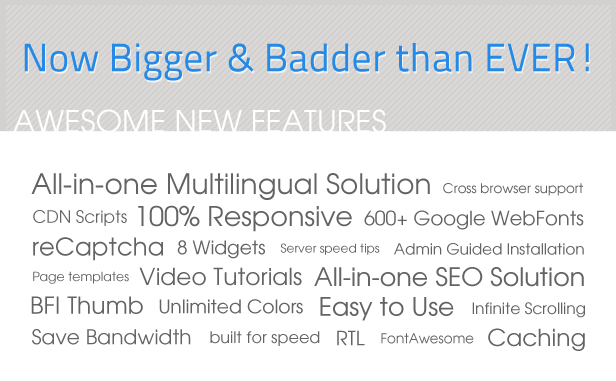
<style>
.page{position:relative;width:616px;height:381px;background:#ffffff}
.page>*{position:absolute;margin:0}
.t1{font:39.5px "TitilliumText25L-400wt";color:#2689e5}
.t2{font:30.3px "TeXGyreAdventor-Regular";color:#ffffff}
.t3{font:28px "TeXGyreAdventor-Regular";color:#636363}
.t4{font:13.3px "TeXGyreAdventor-Regular";color:#636363}
.t5{font:27.1px "TeXGyreAdventor-Regular";color:#636363}
.t6{font:16.8px "TeXGyreAdventor-Regular";color:#636363}
.t7{font:19.5px "TeXGyreAdventor-Regular";color:#636363}
.t8{font:24.6px "TeXGyreAdventor-Regular";color:#636363}
.t9{font:18.7px "TeXGyreAdventor-Regular";color:#636363}
.t10{font:12.1px "TeXGyreAdventor-Regular";color:#636363}
.t11{font:15.2px "TeXGyreAdventor-Regular";color:#636363}
.t12{font:23.4px "TeXGyreAdventor-Regular";color:#636363}
.t13{font:25.2px "TeXGyreAdventor-Regular";color:#636363}
.t14{font:12.5px "TeXGyreAdventor-Regular";color:#636363}
.t15{font:23.6px "TeXGyreAdventor-Regular";color:#636363}
.t16{font:25.3px "TeXGyreAdventor-Regular";color:#636363}
.t17{font:15.4px "TeXGyreAdventor-Regular";color:#636363}
.t18{font:20.4px "TeXGyreAdventor-Regular";color:#636363}
.t19{font:16.1px "TeXGyreAdventor-Regular";color:#636363}
.t20{font:19.4px "TeXGyreAdventor-Regular";color:#636363}
.t21{font:13.5px "TeXGyreAdventor-Regular";color:#636363}
</style>
<div class="page">
<p class="t1" style="left:24px;top:43px;width:565px;height:38px">Now Bigger &amp; Badder than EVER!</p>
<p class="t2" style="left:13px;top:109px;width:373px;height:24px">AWESOME NEW FEATURES</p>
<p class="t3" style="left:31px;top:173px;width:399px;height:27px">All-in-one Multilingual Solution</p>
<p class="t4" style="left:443px;top:183px;width:140px;height:13px">Cross browser support</p>
<p class="t5" style="left:138px;top:205px;width:214px;height:27px">100% Responsive</p>
<p class="t6" style="left:33px;top:210px;width:94px;height:16px">CDN Scripts</p>
<p class="t7" style="left:364px;top:210px;width:220px;height:20px">600+ Google WebFonts</p>
<p class="t8" style="left:33px;top:237px;width:130px;height:24px">reCaptcha</p>
<p class="t9" style="left:177px;top:240px;width:88px;height:19px">8 Widgets</p>
<p class="t10" style="left:280px;top:243px;width:100px;height:12px">Server speed tips</p>
<p class="t11" style="left:394px;top:243px;width:190px;height:12px">Admin Guided Installation</p>
<p class="t12" style="left:139px;top:267px;width:163px;height:19px">Video Tutorials</p>
<p class="t13" style="left:314px;top:267px;width:270px;height:20px">All-in-one SEO Solution</p>
<p class="t14" style="left:33px;top:271px;width:96px;height:13px">Page templates</p>
<p class="t15" style="left:31px;top:296px;width:112px;height:18px">BFI Thumb</p>
<p class="t9" style="left:159px;top:299px;width:144px;height:15px">Unlimited Colors</p>
<p class="t16" style="left:320px;top:297px;width:134px;height:24px">Easy to Use</p>
<p class="t17" style="left:472px;top:302px;width:113px;height:16px">Infinite Scrolling</p>
<p class="t18" style="left:32px;top:329px;width:159px;height:16px">Save Bandwidth</p>
<p class="t12" style="left:488px;top:328px;width:97px;height:23px">Caching</p>
<p class="t19" style="left:210px;top:331px;width:110px;height:15px">built for speed</p>
<p class="t20" style="left:337px;top:330px;width:28px;height:16px">RTL</p>
<p class="t21" style="left:381px;top:333px;width:93px;height:11px">FontAwesome</p>
</div>
